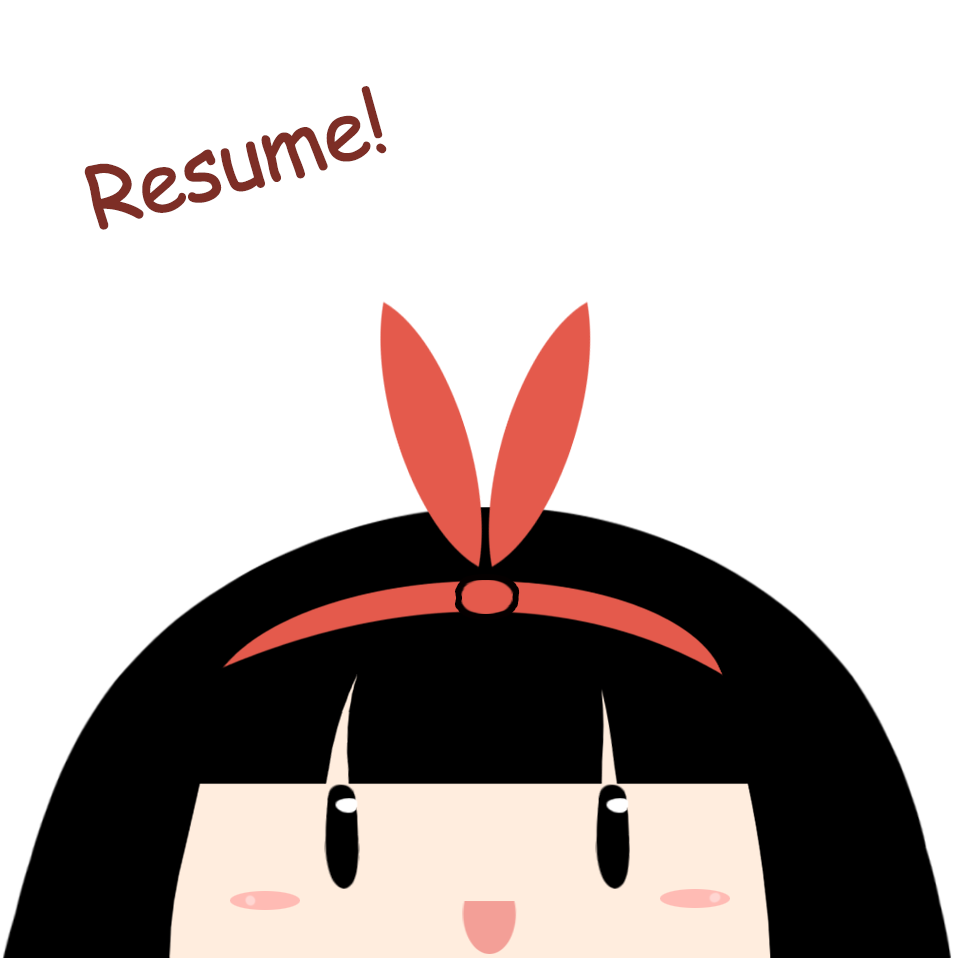
<style>
.page{position:relative;width:958px;height:958px;background:#ffffff}
.page>*{position:absolute;margin:0}
.t1{font:84px "ComicSansMS";letter-spacing:-0.04em;color:#7d2e26;font-weight:bold}
</style>
<div class="page">
<p class="t1" style="left:84px;top:86px;width:303px;height:144px;rotate:-16deg">Resume!</p>
</div>
